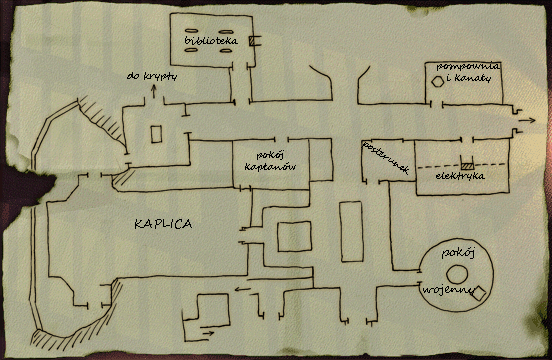
<style>
.page{position:relative;width:552px;height:360px}
.page>*{position:absolute;margin:0}
.t1{font:10px "SegoeScript";color:#000000}
.t2{font:9px "SegoeScript";color:#000000}
.t3{font:12px "SegoeScript";color:#000000}
</style>
<div class="page">
<p class="t1" style="left:185px;top:36px;width:53px;height:9px">biblioteka</p>
<p class="t1" style="left:437px;top:61px;width:63px;height:22px;text-align:center">pompownia<br>i kanały</p>
<p class="t1" style="left:127px;top:72px;width:50px;height:9px">do krypty</p>
<p class="t1" style="left:245px;top:150px;width:51px;height:22px;text-align:center">pokój <br>kapłanów</p>
<p class="t2" style="left:361px;top:142px;width:48px;height:33px;rotate:33deg">posterunek</p>
<p class="t1" style="left:436px;top:172px;width:49px;height:9px">elektryka</p>
<p class="t3" style="left:135px;top:219px;width:57px;height:10px">KAPLICA</p>
<p class="t3" style="left:442px;top:247px;width:33px;height:12px">pokój</p>
<p class="t3" style="left:423px;top:284px;width:52px;height:12px">wojenny</p>
</div>
